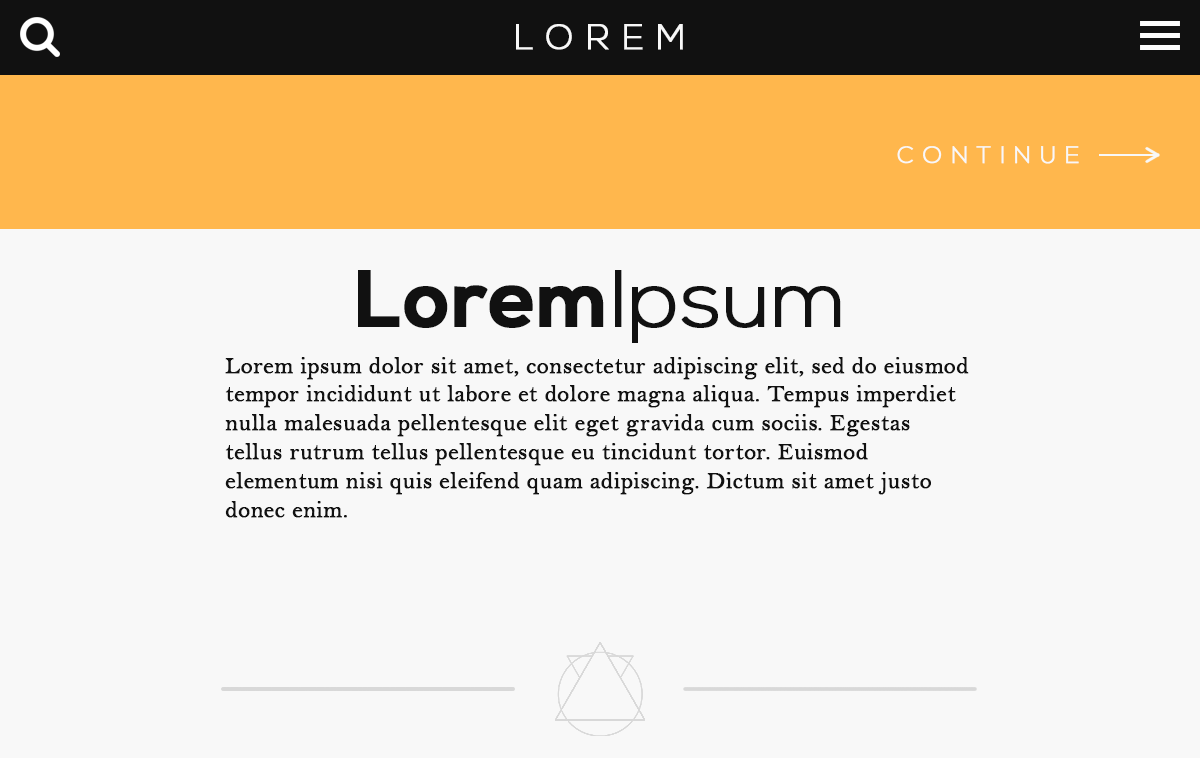
<style>
.page{position:relative;width:1200px;height:758px;background:#f8f8f8}
.page>*{position:absolute;margin:0}
.t1{font:50px "NexaLight";letter-spacing:0.34em;color:#f8f8f8;font-variant:small-caps;font-weight:bold}
.t2{font:24px "NexaLight";letter-spacing:0.34em;color:#f8f8f8;font-variant:small-caps;font-weight:bold}
.t3{font:80px "NexaBold";color:#111111;font-weight:bold}
.t4{font:80px "NexaLight";color:#111111;font-weight:bold}
.t5{font:24px "BellMT";color:#111111;font-weight:bold}
</style>
<div class="page">
<p class="t1" style="left:516px;top:24px;width:167px;height:26px">lorem</p>
<p class="t2" style="left:897px;top:146px;width:182px;height:18px">CONTINUE</p>
<p class="t3" style="left:358px;top:270px;width:483px;height:73px">Lorem<span class="t4">Ipsum</span></p>
<p class="t5" style="left:225px;top:357px;width:744px;height:161px">Lorem ipsum dolor sit amet, consectetur adipiscing elit, sed do eiusmod tempor incididunt ut labore et dolore magna aliqua. Tempus imperdiet nulla malesuada pellentesque elit eget gravida cum sociis. Egestas tellus rutrum tellus pellentesque eu tincidunt tortor. Euismod elementum nisi quis eleifend quam adipiscing. Dictum sit amet justo donec enim.</p>
</div>
